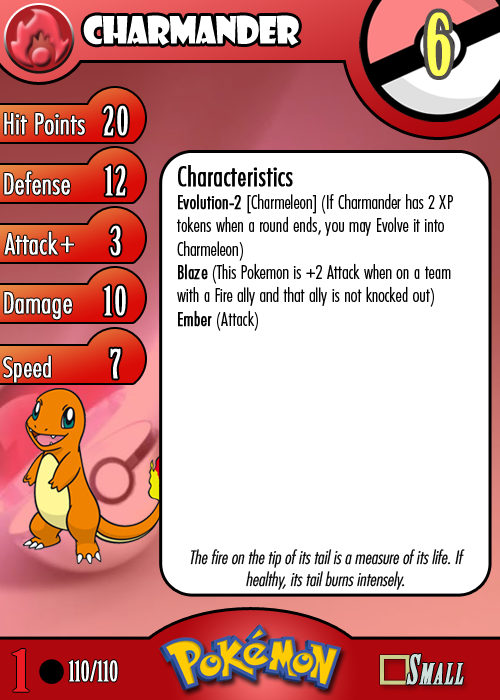
<style>
.page{position:relative;width:500px;height:700px;background:#ffffff}
.page>*{position:absolute;margin:0}
.t1{font:36.7px "ShowcardGothic-Reg";letter-spacing:-0.025em;color:#ffffff;scale:0.91 1}
.t2{font:83.3px "BirchStd";letter-spacing:0.025em;color:#fffd59;font-weight:bold}
.t3{font:27.8px "Futura-CondensedLight";color:#ffffff;font-weight:bold}
.t4{font:38.9px "BirchStd";letter-spacing:0.035em;color:#ffffff;font-weight:bold}
.t5{font:19.4px "FuturaCondensedBQ-Light";color:#010101}
.t6{font:27.8px "FuturaCondensedBQ-Light";color:#010101;font-weight:bold}
.t7{font:19.4px "FuturaCondensedBQ-Light";color:#010101;font-weight:bold}
.t8{font:30.6px "Futura-CondensedLight";color:#ffffff;font-weight:bold}
.t9{font:27.8px "FuturaCondensedBQ-Light";color:#ffffff;font-weight:bold}
.t10{font:18.1px "Futura-CondensedLight";color:#010101;font-style:italic}
.t11{font:55.6px "BirchStd";color:#ed1c24;font-weight:bold;scale:1.5 1}
.t12{font:27.8px "BirchStd";color:#ffffff;font-weight:bold}
</style>
<div class="page">
<p class="t1" style="left:83px;top:15px;width:216px;height:31px">charmander</p>
<p class="t2" style="left:427px;top:12px;width:24px;height:64px">6</p>
<p class="t3" style="left:4px;top:113px;width:81px;height:22px">Hit Points</p>
<p class="t4" style="left:103px;top:105px;width:25px;height:31px">20</p>
<p class="t3" style="left:4px;top:171px;width:66px;height:24px">Defense</p>
<p class="t4" style="left:105px;top:165px;width:21px;height:31px">12</p>
<p class="t5" style="left:177px;top:165px;width:276px;height:166px"><span class="t6">Characteristics<br></span><span class="t7">Evolution-2 </span>[Charmeleon] (If Charmander has 2 XP tokens when a round ends, you may Evolve it into Charmeleon)<br><span class="t7">Blaze</span> (This Pokemon is +2 Attack when on a team with a Fire ally and that ally is not knocked out)<br><span class="t7">Ember</span> (Attack)</p>
<p class="t3" style="left:4px;top:231px;width:54px;height:24px">Attack</p>
<p class="t4" style="left:110px;top:225px;width:11px;height:31px">3</p>
<p class="t8" style="left:60px;top:236px;width:14px;height:17px">+</p>
<p class="t3" style="left:4px;top:292px;width:68px;height:28px">Damage</p>
<p class="t4" style="left:104px;top:285px;width:22px;height:31px">10</p>
<p class="t4" style="left:110px;top:348px;width:11px;height:31px">7</p>
<p class="t9" style="left:3px;top:355px;width:48px;height:28px">Speed</p>
<p class="t10" style="left:190px;top:549px;width:275px;height:41px;text-align:center">The fire on the tip of its tail is a measure of its life. If healthy, its tail burns intensely.</p>
<p class="t11" style="left:12px;top:649px;width:17px;height:43px">1</p>
<p class="t12" style="left:68px;top:660px;width:50px;height:22px">110/110</p>
</div>
